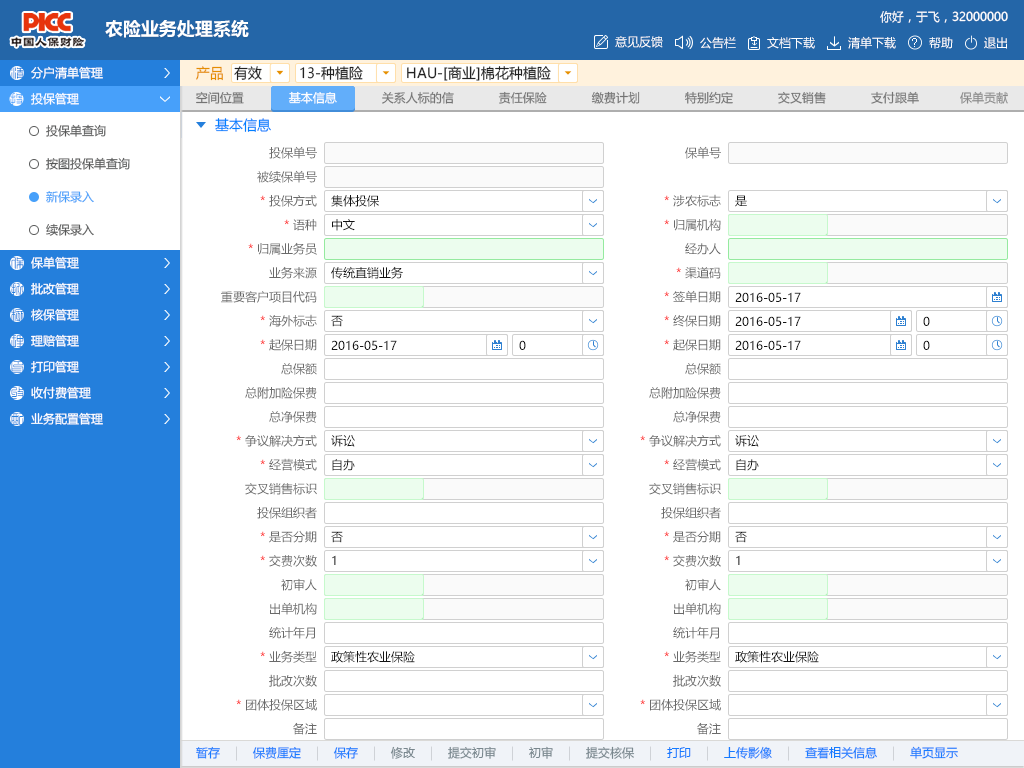
<style>
.page{position:relative;width:1024px;height:768px;background:#ffffff}
.page>*{position:absolute;margin:0}
.t1{font:12px "MicrosoftYaHei";color:#ffffff}
.t2{font:18px "MicrosoftYaHei-Bold";color:#ffffff}
.t3{font:12px "ArialMT";color:#ffffff}
.t4{font:13.3px "HanWangInJang";color:#247fdc}
.t5{font:14px "MicrosoftYaHei";color:#e58e00}
.t6{font:14px "MicrosoftYaHei";color:#212121}
.t7{font:13.3px "HanWangInJang";color:#47a0fa}
.t8{font:12px "MicrosoftYaHei";color:#747474}
.t9{font:12px "MicrosoftYaHei";color:#8a8a8a}
.t10{font:12px "MicrosoftYaHei";color:#575858}
.t11{font:14px "MicrosoftYaHei";color:#0080ff}
.t12{font:12px "MicrosoftYaHei";color:#6a6a6a}
.t13{font:12px "MicrosoftYaHei";color:#47a0fa}
.t14{font:12px "MicrosoftYaHei";color:#ff0000}
.t15{font:12px "MicrosoftYaHei";color:#131313}
.t16{font:13.3px "HanWangInJang"}
.t17{font:12px "MicrosoftYaHei"}
.t18{font:12px "MicrosoftYaHei";color:#157bff}
.t19{font:12px "MicrosoftYaHei";color:#79878e}
</style>
<div class="page">
<p class="t1" style="left:880px;top:10px;width:128px;height:13px">你好，于飞，32000000</p>
<p class="t2" style="left:105px;top:20px;width:144px;height:18px">农险业务处理系统</p>
<p class="t1" style="left:615px;top:36px;width:48px;height:12px">意见反馈</p>
<p class="t1" style="left:700px;top:37px;width:36px;height:12px">公告栏</p>
<p class="t1" style="left:767px;top:37px;width:48px;height:12px">文档下载</p>
<p class="t1" style="left:848px;top:36px;width:48px;height:13px">清单下载</p>
<p class="t3" style="left:912px;top:38px;width:5px;height:9px">?</p>
<p class="t1" style="left:929px;top:37px;width:24px;height:12px">帮助</p>
<p class="t1" style="left:984px;top:37px;width:23px;height:12px">退出</p>
<p class="t4" style="left:11px;top:67px;width:13px;height:12px">清</p>
<p class="t1" style="left:31px;top:66px;width:72px;height:13px">分户清单管理</p>
<p class="t5" style="left:196px;top:66px;width:27px;height:15px">产品</p>
<p class="t6" style="left:234px;top:66px;width:28px;height:15px">有效</p>
<p class="t6" style="left:300px;top:66px;width:63px;height:14px">13-种植险</p>
<p class="t6" style="left:407px;top:66px;width:144px;height:15px">HAU-[商业]棉花种植险</p>
<p class="t7" style="left:10px;top:93px;width:13px;height:12px">投</p>
<p class="t1" style="left:31px;top:92px;width:48px;height:13px">投保管理</p>
<p class="t8" style="left:196px;top:91px;width:48px;height:13px">空间位置</p>
<p class="t1" style="left:288px;top:91px;width:49px;height:13px">基本信息</p>
<p class="t8" style="left:382px;top:91px;width:72px;height:13px">关系人标的信</p>
<p class="t8" style="left:498px;top:91px;width:49px;height:13px">责任保险</p>
<p class="t8" style="left:591px;top:91px;width:49px;height:13px">缴费计划</p>
<p class="t8" style="left:685px;top:91px;width:48px;height:13px">特别约定</p>
<p class="t8" style="left:778px;top:91px;width:48px;height:13px">交叉销售</p>
<p class="t8" style="left:871px;top:91px;width:48px;height:13px">支付跟单</p>
<p class="t9" style="left:960px;top:91px;width:48px;height:13px">保单贡献</p>
<p class="t10" style="left:46px;top:124px;width:60px;height:13px">投保单查询</p>
<p class="t11" style="left:215px;top:118px;width:56px;height:14px">基本信息</p>
<p class="t12" style="left:269px;top:146px;width:48px;height:13px">投保单号</p>
<p class="t12" style="left:685px;top:146px;width:36px;height:13px">保单号</p>
<p class="t10" style="left:46px;top:157px;width:84px;height:13px">按图投保单查询</p>
<p class="t12" style="left:257px;top:170px;width:60px;height:13px">被续保单号</p>
<p class="t13" style="left:46px;top:191px;width:48px;height:12px">新保录入</p>
<p class="t12" style="left:260px;top:195px;width:57px;height:12px"><span class="t14">* </span>投保方式</p>
<p class="t15" style="left:331px;top:195px;width:48px;height:12px">集体投保</p>
<p class="t12" style="left:664px;top:194px;width:57px;height:13px"><span class="t14">* </span>涉农标志</p>
<p class="t15" style="left:735px;top:195px;width:12px;height:12px">是</p>
<p class="t12" style="left:284px;top:219px;width:33px;height:12px"><span class="t14">* </span>语种</p>
<p class="t15" style="left:332px;top:219px;width:23px;height:12px">中文</p>
<p class="t12" style="left:664px;top:219px;width:57px;height:12px"><span class="t14">*</span> 归属机构</p>
<p class="t10" style="left:46px;top:223px;width:48px;height:13px">续保录入</p>
<p class="t12" style="left:248px;top:242px;width:69px;height:13px"><span class="t14">*</span> 归属业务员</p>
<p class="t12" style="left:685px;top:243px;width:36px;height:12px">经办人</p>
<p class="t16" style="left:11px;top:257px;width:13px;height:12px">保</p>
<p class="t1" style="left:31px;top:256px;width:48px;height:13px">保单管理</p>
<p class="t12" style="left:269px;top:266px;width:48px;height:13px">业务来源</p>
<p class="t15" style="left:331px;top:266px;width:72px;height:13px">传统直销业务</p>
<p class="t12" style="left:676px;top:267px;width:45px;height:12px"><span class="t14">*</span> 渠道码</p>
<p class="t4" style="left:11px;top:283px;width:13px;height:13px">批</p>
<p class="t1" style="left:31px;top:282px;width:48px;height:13px">批改管理</p>
<p class="t12" style="left:221px;top:291px;width:96px;height:12px">重要客户项目代码</p>
<p class="t12" style="left:664px;top:290px;width:57px;height:13px"><span class="t14">*</span> 签单日期</p>
<p class="t15" style="left:735px;top:292px;width:66px;height:10px">2016-05-17</p>
<p class="t4" style="left:11px;top:309px;width:13px;height:12px">核</p>
<p class="t1" style="left:31px;top:308px;width:48px;height:13px">核保管理</p>
<p class="t12" style="left:260px;top:314px;width:57px;height:13px"><span class="t14">* </span>海外标志</p>
<p class="t15" style="left:331px;top:315px;width:12px;height:12px">否</p>
<p class="t12" style="left:664px;top:315px;width:57px;height:12px"><span class="t14">*</span> 终保日期</p>
<p class="t15" style="left:735px;top:316px;width:66px;height:10px">2016-05-17</p>
<p class="t15" style="left:923px;top:316px;width:7px;height:10px">0</p>
<p class="t4" style="left:11px;top:335px;width:13px;height:12px">理</p>
<p class="t1" style="left:31px;top:334px;width:48px;height:13px">理赔管理</p>
<p class="t12" style="left:260px;top:339px;width:57px;height:12px"><span class="t14">*</span> 起保日期</p>
<p class="t15" style="left:331px;top:340px;width:66px;height:10px">2016-05-17</p>
<p class="t15" style="left:519px;top:340px;width:7px;height:10px">0</p>
<p class="t12" style="left:664px;top:339px;width:57px;height:12px"><span class="t14">*</span> 起保日期</p>
<p class="t15" style="left:735px;top:340px;width:66px;height:10px">2016-05-17</p>
<p class="t15" style="left:923px;top:340px;width:7px;height:10px">0</p>
<p class="t16" style="left:11px;top:361px;width:13px;height:13px">印</p>
<p class="t1" style="left:31px;top:360px;width:48px;height:13px">打印管理</p>
<p class="t12" style="left:281px;top:363px;width:36px;height:12px">总保额</p>
<p class="t12" style="left:685px;top:363px;width:36px;height:12px">总保额</p>
<p class="t4" style="left:11px;top:387px;width:13px;height:12px">收</p>
<p class="t1" style="left:31px;top:386px;width:60px;height:13px">收付费管理</p>
<p class="t12" style="left:245px;top:387px;width:72px;height:12px">总附加险保费</p>
<p class="t12" style="left:649px;top:387px;width:72px;height:12px">总附加险保费</p>
<p class="t4" style="left:11px;top:413px;width:13px;height:12px">配</p>
<p class="t1" style="left:31px;top:412px;width:72px;height:13px">业务配置管理</p>
<p class="t12" style="left:269px;top:411px;width:48px;height:12px">总净保费</p>
<p class="t12" style="left:673px;top:411px;width:48px;height:12px">总净保费</p>
<p class="t12" style="left:236px;top:435px;width:81px;height:12px"><span class="t14">* </span>争议解决方式</p>
<p class="t15" style="left:331px;top:435px;width:24px;height:12px">诉讼</p>
<p class="t12" style="left:640px;top:435px;width:81px;height:12px"><span class="t14">* </span>争议解决方式</p>
<p class="t15" style="left:735px;top:435px;width:24px;height:12px">诉讼</p>
<p class="t12" style="left:260px;top:458px;width:57px;height:13px"><span class="t14">* </span>经营模式</p>
<p class="t15" style="left:332px;top:459px;width:23px;height:12px">自办</p>
<p class="t12" style="left:664px;top:458px;width:57px;height:13px"><span class="t14">* </span>经营模式</p>
<p class="t15" style="left:736px;top:459px;width:23px;height:12px">自办</p>
<p class="t12" style="left:245px;top:483px;width:72px;height:12px">交叉销售标识</p>
<p class="t12" style="left:649px;top:483px;width:72px;height:12px">交叉销售标识</p>
<p class="t12" style="left:257px;top:507px;width:60px;height:12px">投保组织者</p>
<p class="t12" style="left:661px;top:507px;width:60px;height:12px">投保组织者</p>
<p class="t12" style="left:260px;top:530px;width:57px;height:13px"><span class="t14">* </span>是否分期</p>
<p class="t15" style="left:331px;top:531px;width:12px;height:12px">否</p>
<p class="t12" style="left:664px;top:530px;width:57px;height:13px"><span class="t14">* </span>是否分期</p>
<p class="t15" style="left:735px;top:531px;width:12px;height:12px">否</p>
<p class="t12" style="left:260px;top:555px;width:57px;height:12px"><span class="t14">* </span>交费次数</p>
<p class="t17" style="left:332px;top:555px;width:4px;height:10px">1</p>
<p class="t12" style="left:664px;top:555px;width:57px;height:12px"><span class="t14">* </span>交费次数</p>
<p class="t17" style="left:736px;top:555px;width:4px;height:10px">1</p>
<p class="t12" style="left:281px;top:578px;width:36px;height:13px">初审人</p>
<p class="t12" style="left:685px;top:578px;width:36px;height:13px">初审人</p>
<p class="t12" style="left:270px;top:602px;width:47px;height:13px">出单机构</p>
<p class="t12" style="left:674px;top:602px;width:47px;height:13px">出单机构</p>
<p class="t12" style="left:269px;top:626px;width:46px;height:13px">统计年月</p>
<p class="t12" style="left:673px;top:626px;width:46px;height:13px">统计年月</p>
<p class="t12" style="left:260px;top:650px;width:57px;height:13px"><span class="t14">* </span>业务类型</p>
<p class="t15" style="left:331px;top:651px;width:84px;height:12px">政策性农业保险</p>
<p class="t12" style="left:664px;top:650px;width:57px;height:13px"><span class="t14">* </span>业务类型</p>
<p class="t15" style="left:735px;top:651px;width:84px;height:12px">政策性农业保险</p>
<p class="t12" style="left:269px;top:674px;width:48px;height:13px">批改次数</p>
<p class="t12" style="left:673px;top:674px;width:48px;height:13px">批改次数</p>
<p class="t12" style="left:236px;top:699px;width:81px;height:12px"><span class="t14">* </span>团体投保区域</p>
<p class="t12" style="left:640px;top:699px;width:81px;height:12px"><span class="t14">* </span>团体投保区域</p>
<p class="t12" style="left:293px;top:722px;width:24px;height:13px">备注</p>
<p class="t12" style="left:697px;top:722px;width:24px;height:13px">备注</p>
<p class="t18" style="left:196px;top:746px;width:24px;height:13px">暂存</p>
<p class="t18" style="left:252px;top:746px;width:49px;height:13px">保费厘定</p>
<p class="t18" style="left:333px;top:746px;width:25px;height:13px">保存</p>
<p class="t19" style="left:390px;top:746px;width:25px;height:13px">修改</p>
<p class="t19" style="left:448px;top:746px;width:48px;height:13px">提交初审</p>
<p class="t19" style="left:529px;top:746px;width:24px;height:13px">初审</p>
<p class="t19" style="left:586px;top:746px;width:49px;height:13px">提交核保</p>
<p class="t18" style="left:667px;top:747px;width:24px;height:11px">打印</p>
<p class="t18" style="left:724px;top:746px;width:48px;height:13px">上传影像</p>
<p class="t18" style="left:805px;top:746px;width:72px;height:13px">查看相关信息</p>
<p class="t18" style="left:910px;top:746px;width:48px;height:13px">单页显示</p>
</div>
